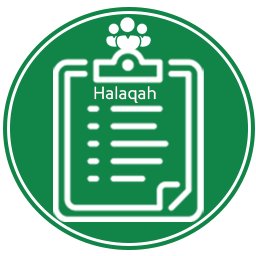
<style>
.page{position:relative;width:256px;height:256px;background:#118447}
.page>*{position:absolute;margin:0}
.t1{font:17.5px "PerspectiveSans";color:#ffffff}
</style>
<div class="page">
<p class="t1" style="left:94px;top:86px;width:62px;height:17px">Halaqah</p>
</div>
